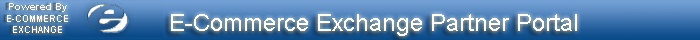
<style>
.page{position:relative;width:700px;height:40px}
.page>*{position:absolute;margin:0}
.t1{font:24px "ArialMT";color:#ffffff}
</style>
<div class="page">
<p class="t1" style="left:171px;top:14px;width:406px;height:22px">E-Commerce Exchange Partner Portal</p>
</div>
